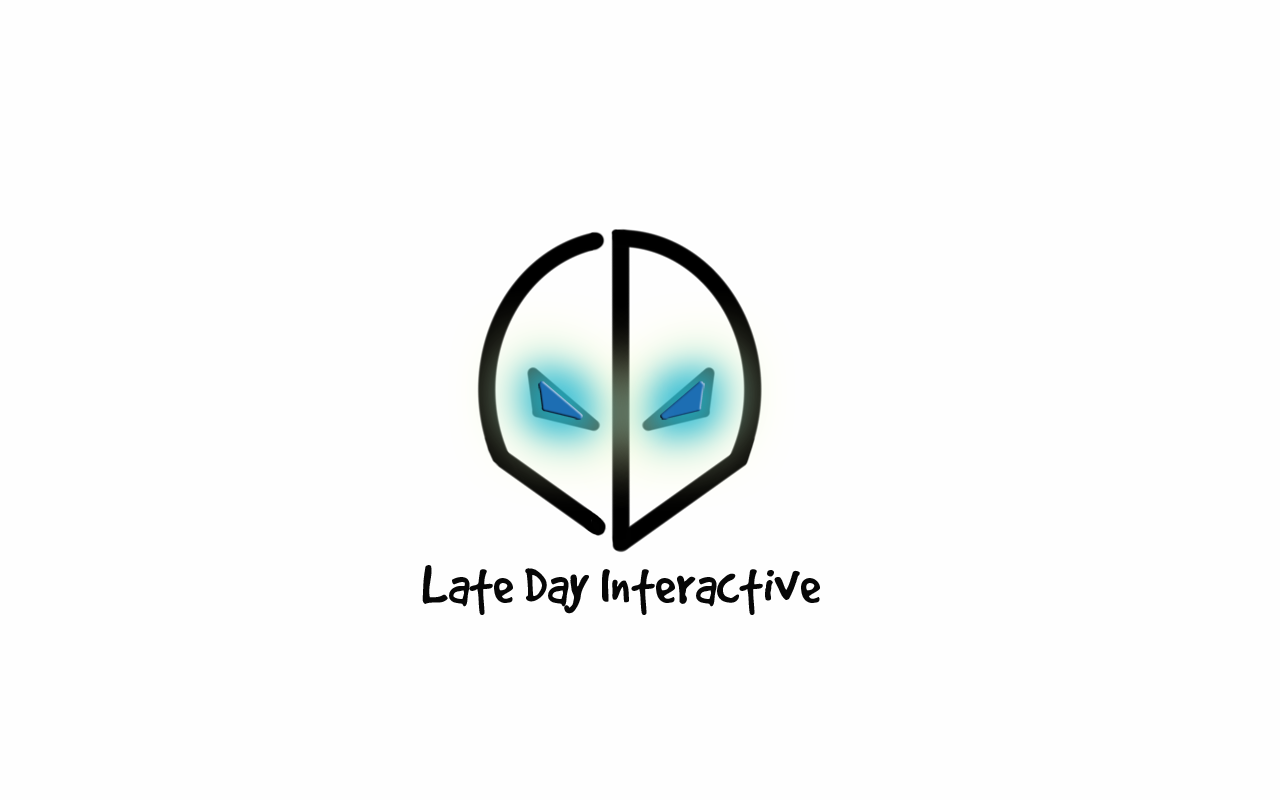
<style>
.page{position:relative;width:1280px;height:800px;background:#fefefe}
.page>*{position:absolute;margin:0}
.t1{font:60px "GoodDog";color:#070707}
</style>
<div class="page">
<p class="t1" style="left:422px;top:565px;width:398px;height:50px">Late Day Interactive</p>
</div>
